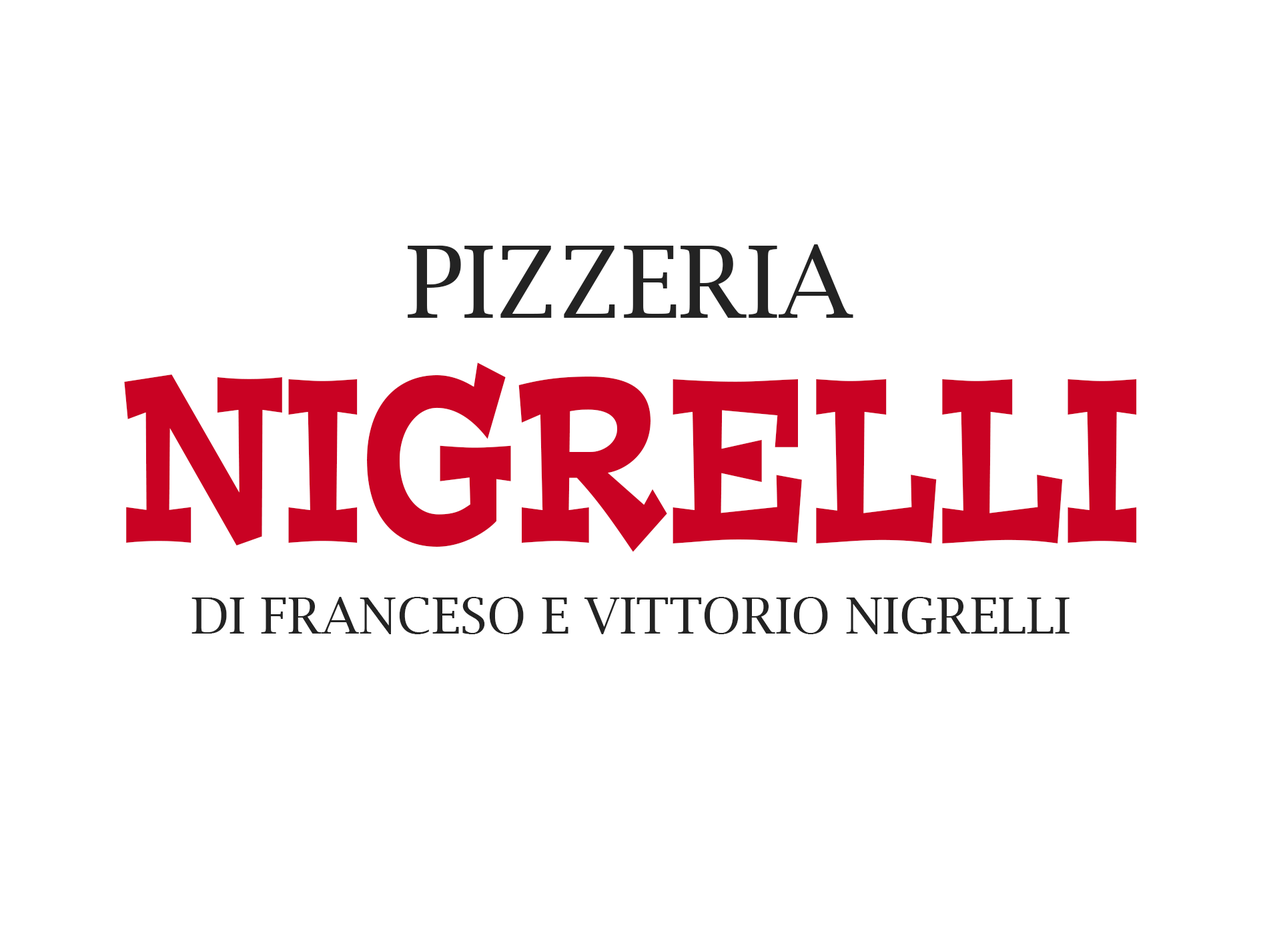
<style>
.page{position:relative;width:1261px;height:946px;background:#ffffff}
.page>*{position:absolute;margin:0}
.t1{font:100.1px "LucidaBright";color:#232323}
.t2{font:231.5px "PostinoStd";color:#c90223;scale:0.62 1}
.t3{font:50px "LucidaBright";color:#232323}
</style>
<div class="page">
<p class="t1" style="left:408px;top:244px;width:445px;height:74px">PIZZERIA</p>
<p class="t2" style="left:124px;top:362px;width:1013px;height:190px">NIGRELLI</p>
<p class="t3" style="left:192px;top:597px;width:878px;height:37px">DI FRANCESO E VITTORIO NIGRELLI</p>
</div>
